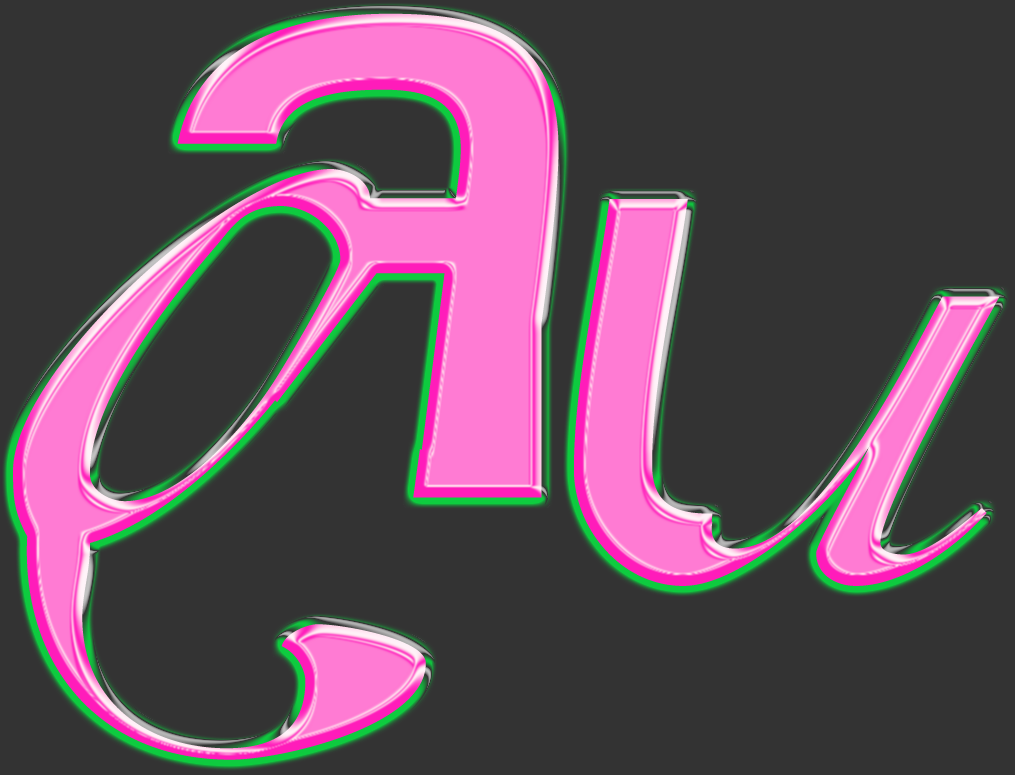
<style>
.page{position:relative;width:1015px;height:775px;background:#333333}
.page>*{position:absolute;margin:0}
.t1{font:946.6px "ElliottsOT-BlueEyeShadow"}
.t2{font:743.4px "ElliottsOT-BlueEyeShadow"}
</style>
<div class="page">
<p class="t1" style="left:13px;top:13px;width:546px;height:747px">a</p>
<p class="t2" style="left:574px;top:199px;width:426px;height:387px">u</p>
</div>
